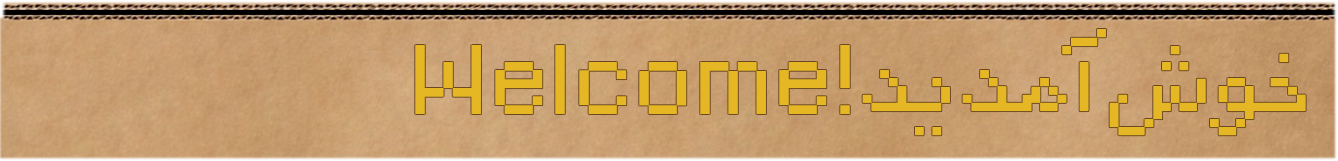
<style>
.page{position:relative;width:1338px;height:161px}
.page>*{position:absolute;margin:0}
.t1{font:101.8px "unixel";letter-spacing:-0.04em;color:#e6b725;scale:1.07 1}
.t2{font:109.4px "unixel";letter-spacing:-0.04em;color:#e6b725;scale:1.07 1}
</style>
<div class="page">
<p class="t1" style="left:862px;top:29px;width:444px;height:107px">خوش آمدید</p>
<p class="t2" style="left:415px;top:45px;width:435px;height:69px">Welcome!</p>
</div>
